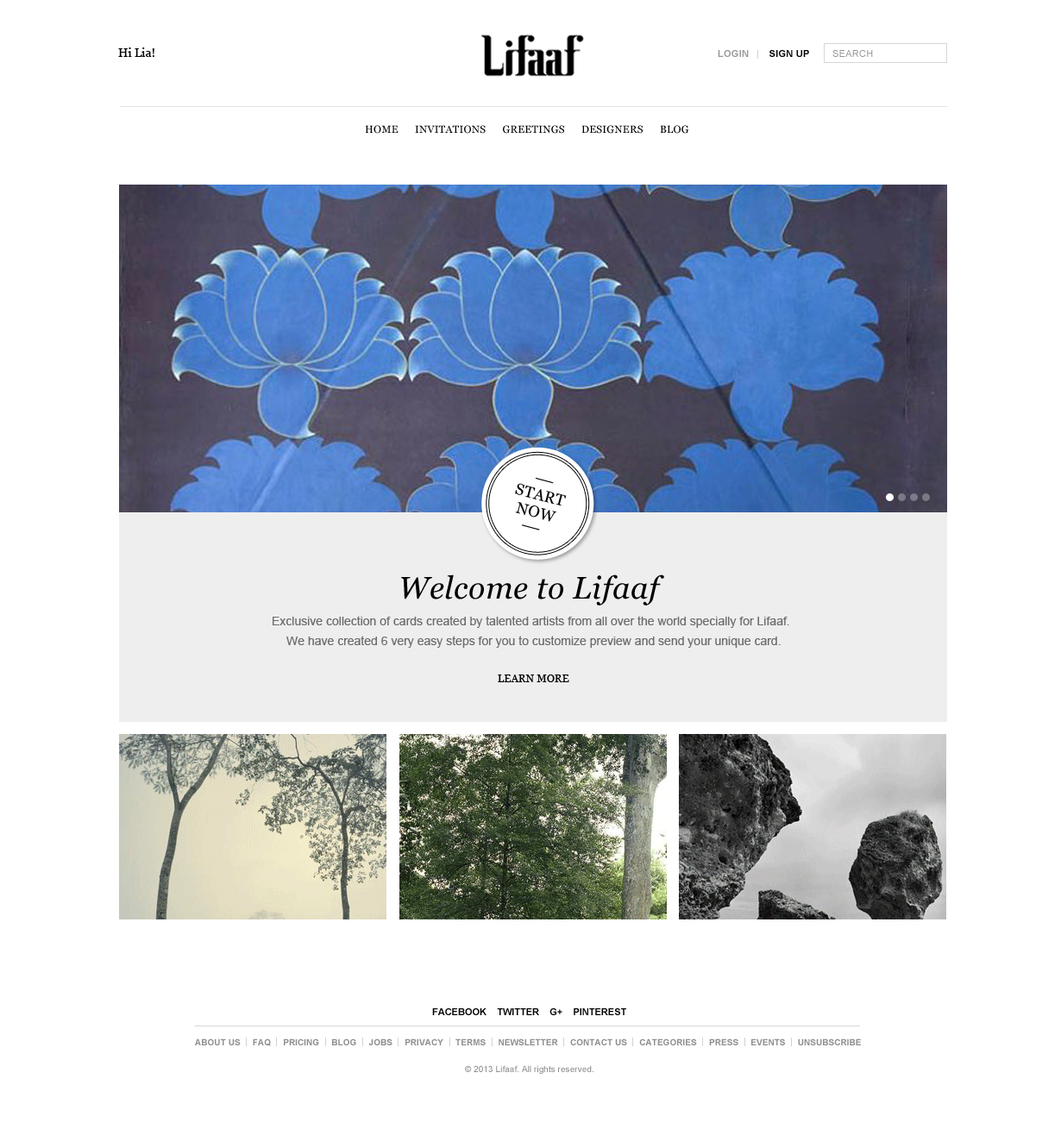
<style>
.page{position:relative;width:1061px;height:1123px;background:#ffffff}
.page>*{position:absolute;margin:0}
.t1{font:12.1px "Georgia";color:#010101}
.t2{font:9.5px "Arial-BoldMT";letter-spacing:0.025em;color:#000000}
.t3{font:9.5px "Arial-BoldMT";letter-spacing:0.025em;color:#959595}
.t4{font:9.5px "ArialMT";letter-spacing:0.025em;color:#959595;text-transform:uppercase}
.t5{font:10.4px "Georgia";letter-spacing:0.025em;color:#000000;text-transform:uppercase}
.t6{font:15.5px/17.8px "Georgia";letter-spacing:0.025em;color:#000000}
.t7{font:31.1px "Georgia-Italic";letter-spacing:0.015em;color:#000000}
.t8{font:12.1px "ArialMT";color:#6c6c6c}
.t9{font:9.5px "Arial-BoldMT";color:#010101;text-transform:uppercase}
.t10{font:8.6px "Arial-BoldMT";letter-spacing:0.005em;color:#8f8f8f;text-transform:uppercase}
.t11{font:8.6px "ArialMT";letter-spacing:0.005em;color:#8f8f8f}
</style>
<div class="page">
<p class="t1" style="left:118px;top:47px;width:36px;height:10px">Hi Lia!</p>
<p class="t2" style="left:718px;top:50px;width:91px;height:7px"><span class="t3">LOGIN       </span>SIGN UP</p>
<p class="t4" style="left:833px;top:50px;width:40px;height:7px">search</p>
<p class="t5" style="left:365px;top:125px;width:324px;height:9px">home      invitations      greetings      designers      blog</p>
<p class="t6" style="left:515px;top:483px;width:52px;height:39px;text-align:center;rotate:15deg">START<br>NOW</p>
<p class="t7" style="left:401px;top:575px;width:263px;height:31px">Welcome to Lifaaf</p>
<p class="t8" style="left:273px;top:616px;width:517px;height:12px">Exclusive collection of cards created by talented artists from all over the world specially for Lifaaf.</p>
<p class="t8" style="left:286px;top:636px;width:495px;height:12px">We have created 6 very easy steps for you to customize preview and send your unique card.</p>
<p class="t5" style="left:498px;top:675px;width:72px;height:8px">Learn more</p>
<p class="t9" style="left:432px;top:1009px;width:194px;height:7px">FACEBOOK    TWITTER    G+    PINTEREST</p>
<p class="t10" style="left:195px;top:1039px;width:666px;height:8px">About Us     FAQ     Pricing     blog     Jobs     Privacy     Terms     Newsletter     contact us     categories     press     Events     unsubscribe</p>
<p class="t11" style="left:465px;top:1066px;width:129px;height:8px">© 2013 Lifaaf. All rights reserved.</p>
</div>
